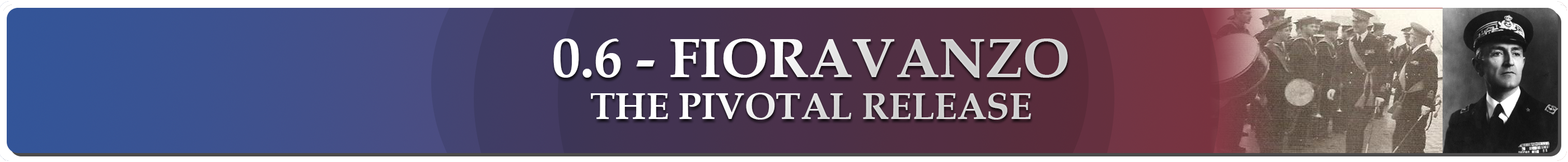
<style>
.page{position:relative;width:1568px;height:162px}
.page>*{position:absolute;margin:0}
.t1{font:37.3px/42px "BookAntiqua-Bold"}
.t2{font:56px "BookAntiqua-Bold"}
</style>
<div class="page">
<p class="t1" style="left:553px;top:39px;width:515px;height:81px;text-align:center"><span class="t2">0.6 - FIORAVANZO<br></span>THE PIVOTAL RELEASE</p>
</div>
